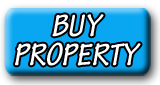
<style>
.page{position:relative;width:160px;height:85px}
.page>*{position:absolute;margin:0}
.t1{font:33.3px "TektonPro-BoldCond";color:#ffffff;font-style:italic}
</style>
<div class="page">
<p class="t1" style="left:52px;top:14px;width:52px;height:23px">BUY</p>
<p class="t1" style="left:15px;top:42px;width:126px;height:24px">PROPERTY</p>
</div>
